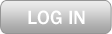
<style>
.page{position:relative;width:112px;height:34px}
.page>*{position:absolute;margin:0}
.t1{font:20px "FranklinGothic-Medium";color:#ffffff}
</style>
<div class="page">
<p class="t1" style="left:28px;top:10px;width:57px;height:15px">LOG IN</p>
</div>
